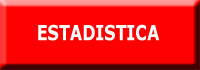
<style>
.page{position:relative;width:200px;height:70px;background:#ff0000}
.page>*{position:absolute;margin:0}
.t1{font:21px "Verdana-Bold";color:#ffffff;scale:0.76 1}
</style>
<div class="page">
<p class="t1" style="left:38px;top:24px;width:122px;height:17px">ESTADISTICA</p>
</div>
